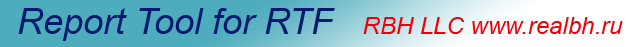
<style>
.page{position:relative;width:632px;height:47px}
.page>*{position:absolute;margin:0}
.t1{font:24px "Arial-ItalicMT";color:#ef0006}
.t2{font:36px "Arial-ItalicMT";color:#001a6f}
</style>
<div class="page">
<p class="t1" style="left:18px;top:8px;width:605px;height:33px"><span class="t2">Report Tool for RTF   </span>RBH LLC www.realbh.ru</p>
</div>
